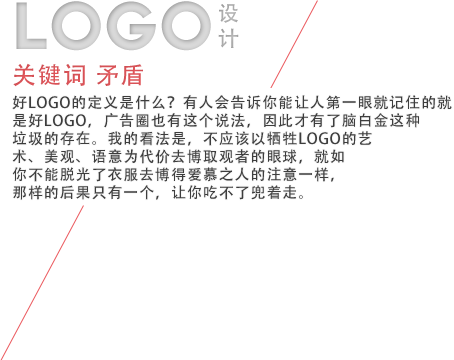
<style>
.page{position:relative;width:454px;height:360px;background:#ffffff}
.page>*{position:absolute;margin:0}
.t1{font:60px "TYPOGRAPHPRO-ExtraBold";color:#d2d2d2}
.t2{font:21px "AdobeHeitiStd-Regular";letter-spacing:0.06em;color:#ababab}
.t3{font:24px "AdobeHeitiStd-Regular";letter-spacing:0.06em;color:#eb595e}
.t4{font:15px "AdobeHeitiStd-Regular";letter-spacing:0.06em;color:#3d3d3d}
</style>
<div class="page">
<p class="t1" style="left:16px;top:1px;width:195px;height:50px">LOGO</p>
<p class="t2" style="left:218px;top:4px;width:21px;height:44px">设<br>计</p>
<p class="t3" style="left:13px;top:63px;width:130px;height:24px">关键词 矛盾</p>
<p class="t4" style="left:12px;top:95px;width:440px;height:105px">好LOGO的定义是什么？有人会告诉你能让人第一眼就记住的就<br>是好LOGO，广告圈也有这个说法，因此才有了脑白金这种<br>垃圾的存在。我的看法是，不应该以牺牲LOGO的艺<br>术、美观、语意为代价去博取观者的眼球，就如<br>你不能脱光了衣服去博得爱慕之人的注意一样，<br>那样的后果只有一个，让你吃不了兜着走。</p>
</div>
